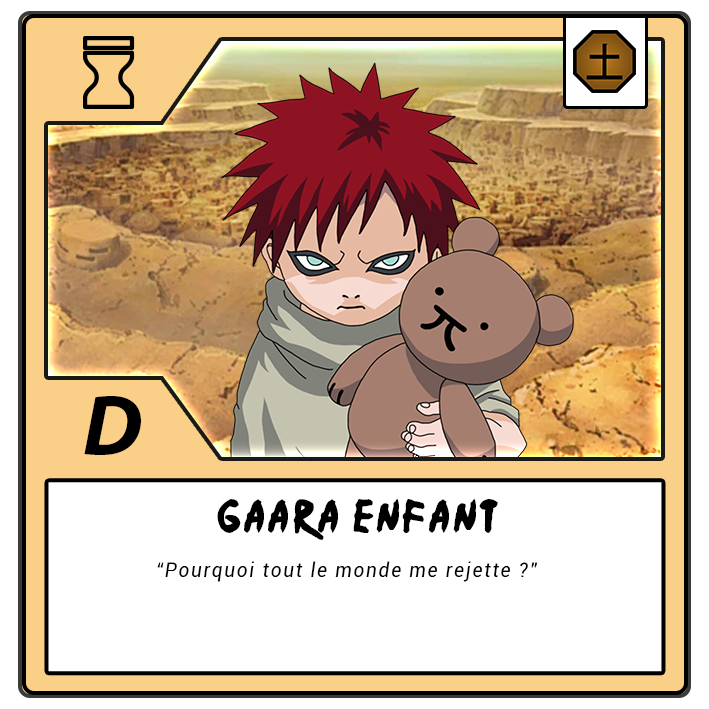
<style>
.page{position:relative;width:709px;height:709px;background:#ffffff}
.page>*{position:absolute;margin:0}
.t1{font:87.5px "MyriadPro-BoldIt";letter-spacing:-0.12em;color:#000000}
.t2{font:37.5px "Ninja-Naruto";letter-spacing:0.1em;color:#000000}
.t3{font:20.8px "Roboto-Italic";letter-spacing:0.1em;color:#000000;scale:0.9 1}
</style>
<div class="page">
<p class="t1" style="left:84px;top:396px;width:57px;height:59px">D</p>
<p class="t2" style="left:217px;top:498px;width:281px;height:42px">Gaara enfant</p>
<p class="t3" style="left:157px;top:561px;width:381px;height:21px">“Pourquoi tout le monde me rejette ?”</p>
</div>
